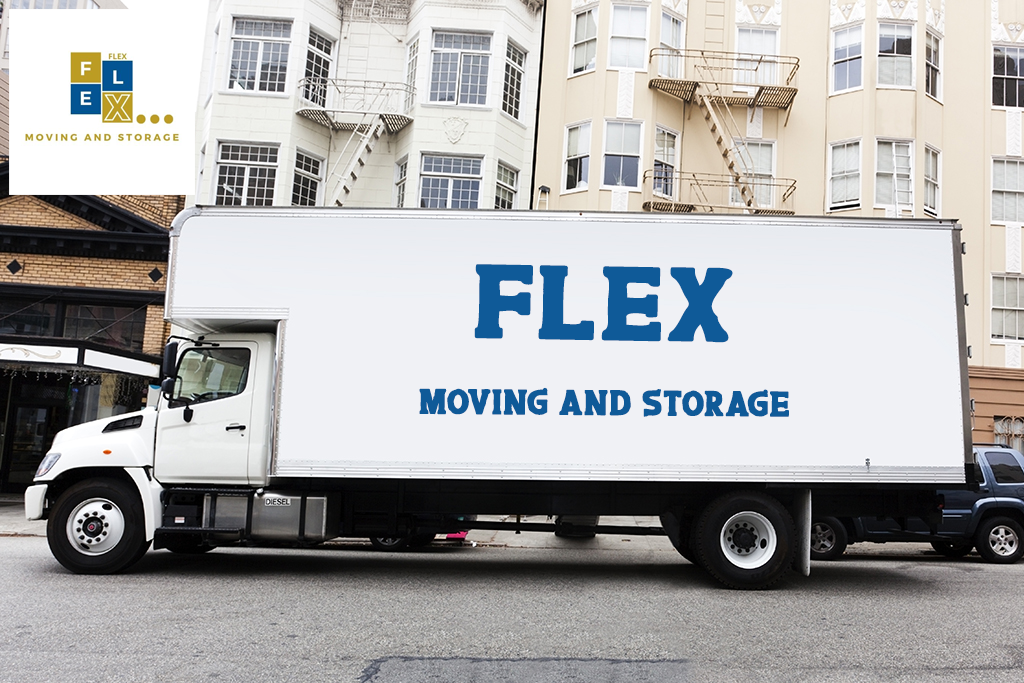
<style>
.page{position:relative;width:1024px;height:683px}
.page>*{position:absolute;margin:0}
.t1{font:105.9px "Caroos";color:#0f5a98;scale:1.07 1}
.t2{font:36px "Caroos";color:#0f5a98}
</style>
<div class="page">
<p class="t1" style="left:474px;top:264px;width:259px;height:79px;rotate:1deg">FLEX</p>
<p class="t2" style="left:419px;top:387px;width:370px;height:30px">MOVING AND STORAGE</p>
</div>
